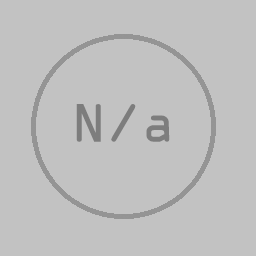
<style>
.page{position:relative;width:256px;height:256px;background:#c2c2c2}
.page>*{position:absolute;margin:0}
.t1{font:48px "OCRAStd";color:#7d7d7d}
</style>
<div class="page">
<p class="t1" style="left:76px;top:104px;width:94px;height:38px">N/a</p>
</div>
